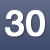
<style>
.page{position:relative;width:50px;height:50px}
.page>*{position:absolute;margin:0}
.t1{font:36px "HelveticaNeueLTStd-Md";color:#ffffff;font-weight:bold}
</style>
<div class="page">
<p class="t1" style="left:5px;top:10px;width:40px;height:27px">30</p>
</div>
